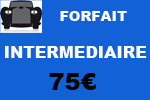
<style>
.page{position:relative;width:150px;height:100px;background:#1361d7}
.page>*{position:absolute;margin:0}
.t1{font:14px "Arial-Black";color:#ffffff}
.t2{font:16px "Arial-Black";color:#ffffff}
.t3{font:24px "Arial-Black";color:#050300}
</style>
<div class="page">
<p class="t1" style="left:60px;top:11px;width:67px;height:10px">FORFAIT</p>
<p class="t2" style="left:5px;top:46px;width:142px;height:12px">INTERMEDIAIRE</p>
<p class="t3" style="left:49px;top:73px;width:47px;height:17px">75€</p>
</div>
